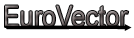
<style>
.page{position:relative;width:134px;height:38px;background:#ffffff}
.page>*{position:absolute;margin:0}
.t1{font:30px "ArialMT";scale:0.84 1}
</style>
<div class="page">
<p class="t1" style="left:5px;top:5px;width:124px;height:23px">EuroVector</p>
</div>
